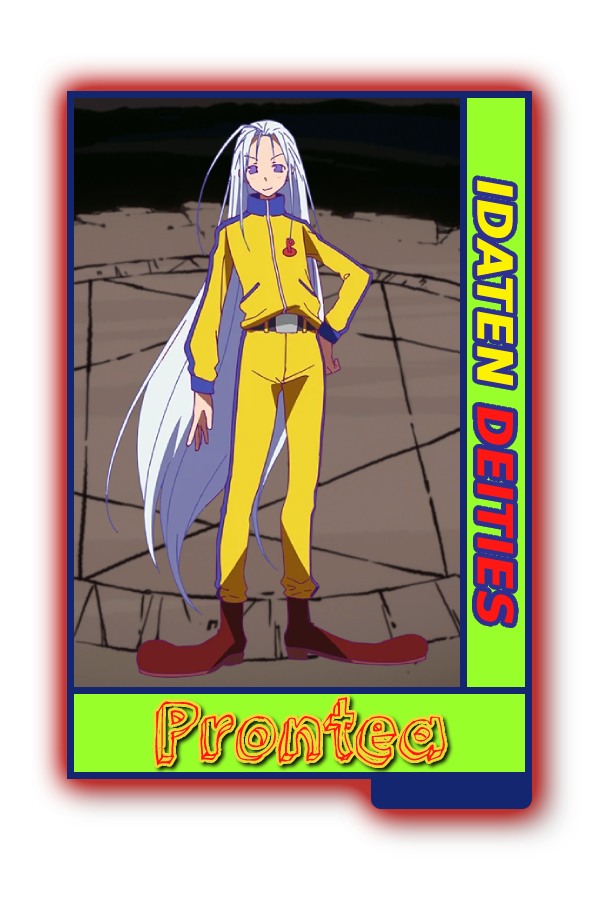
<style>
.page{position:relative;width:600px;height:900px;background:#ffffff}
.page>*{position:absolute;margin:0}
.t1{font:48.8px "MADETOMMY-Bold";color:#ff1713;font-weight:bold;font-style:italic}
.t2{font:48.8px "MADETOMMY-Bold";color:#fdf103;font-weight:bold;font-style:italic}
.t3{font:75px "3dumb";color:#ff1611}
</style>
<div class="page">
<p class="t1" style="left:476px;top:180px;width:38px;height:444px;rotate:90deg"><span class="t2">IDATEN </span>DEITIES</p>
<p class="t3" style="left:155px;top:697px;width:290px;height:69px">Prontea</p>
</div>
